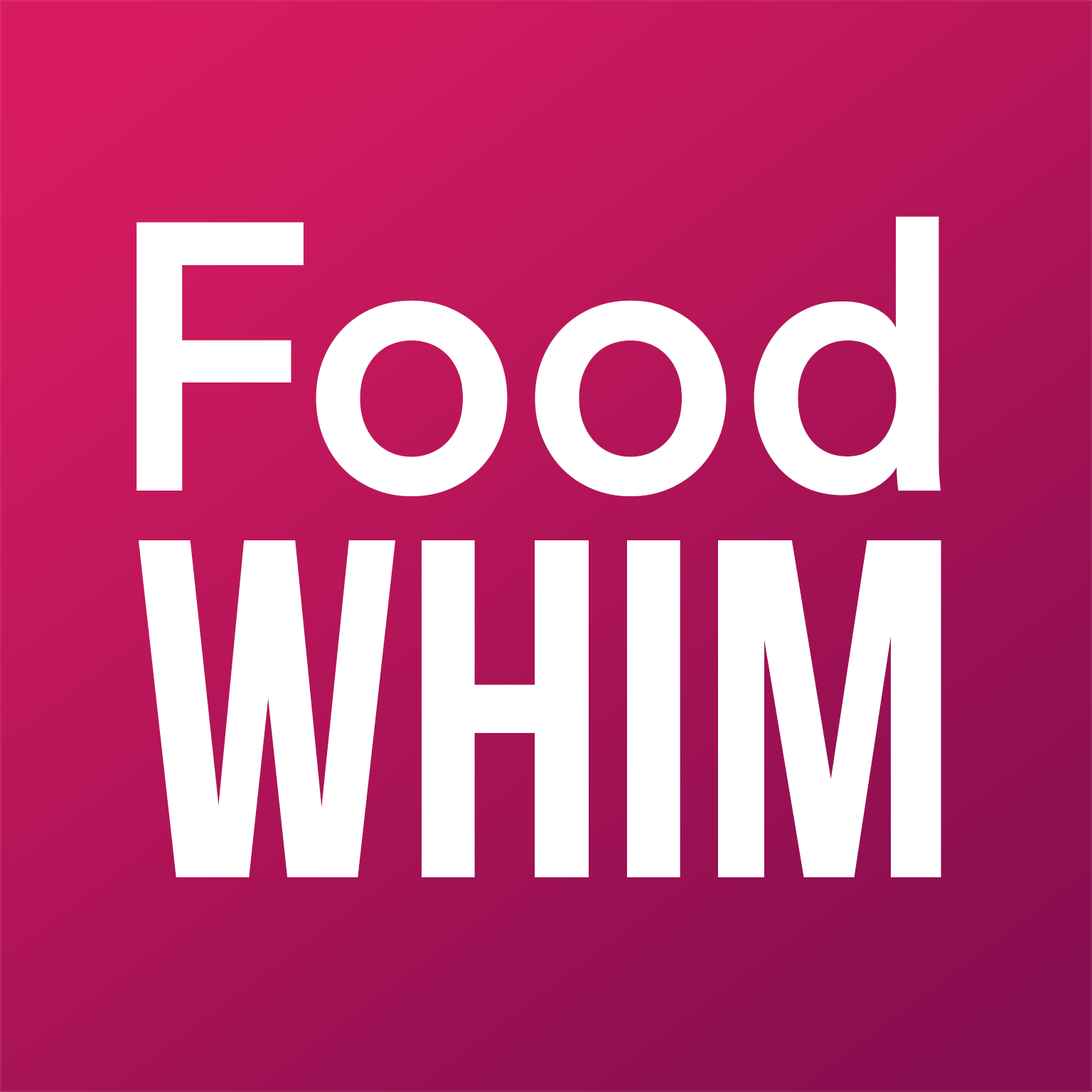
<style>
.page{position:relative;width:1092px;height:1092px}
.page>*{position:absolute;margin:0}
.t1{font:378.2px "CircularTT-Medium";color:#ffffff}
.t2{font:481.3px "BebasNeueBold";color:#ffffff}
</style>
<div class="page">
<p class="t1" style="left:136px;top:216px;width:805px;height:280px">Food</p>
<p class="t2" style="left:139px;top:540px;width:802px;height:337px">WHIM</p>
</div>
